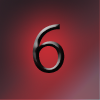
<style>
.page{position:relative;width:100px;height:100px}
.page>*{position:absolute;margin:0}
.t1{font:72px "MyriadPro-Regular";color:#191212}
</style>
<div class="page">
<p class="t1" style="left:32px;top:24px;width:33px;height:49px">6</p>
</div>
